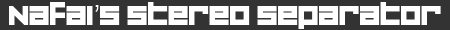
<style>
.page{position:relative;width:450px;height:30px;background:#333333}
.page>*{position:absolute;margin:0}
.t1{font:28px "CorporationGamesStraight";color:#fefefe}
.t2{font:28px "ArialMT";color:#fefefe}
</style>
<div class="page">
<p class="t1" style="left:9px;top:2px;width:432px;height:27px">Nafai<span class="t2">’</span>s Stereo Separator</p>
</div>
